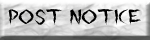
<style>
.page{position:relative;width:150px;height:40px}
.page>*{position:absolute;margin:0}
.t1{font:25px "thenight";letter-spacing:-0.025em;color:#000000;scale:1.08 1}
</style>
<div class="page">
<p class="t1" style="left:8px;top:9px;width:133px;height:16px">POST NoTiCe</p>
</div>
